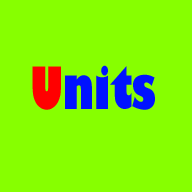
<style>
.page{position:relative;width:192px;height:192px;background:#87ff00}
.page>*{position:absolute;margin:0}
.t1{font:57px "GillSans-UltraBoldCondensed";color:#0012ff}
.t2{font:57px "GillSans-UltraBoldCondensed";color:#ff0000}
</style>
<div class="page">
<p class="t1" style="left:32px;top:65px;width:123px;height:45px"><span class="t2">U</span>nits</p>
</div>
